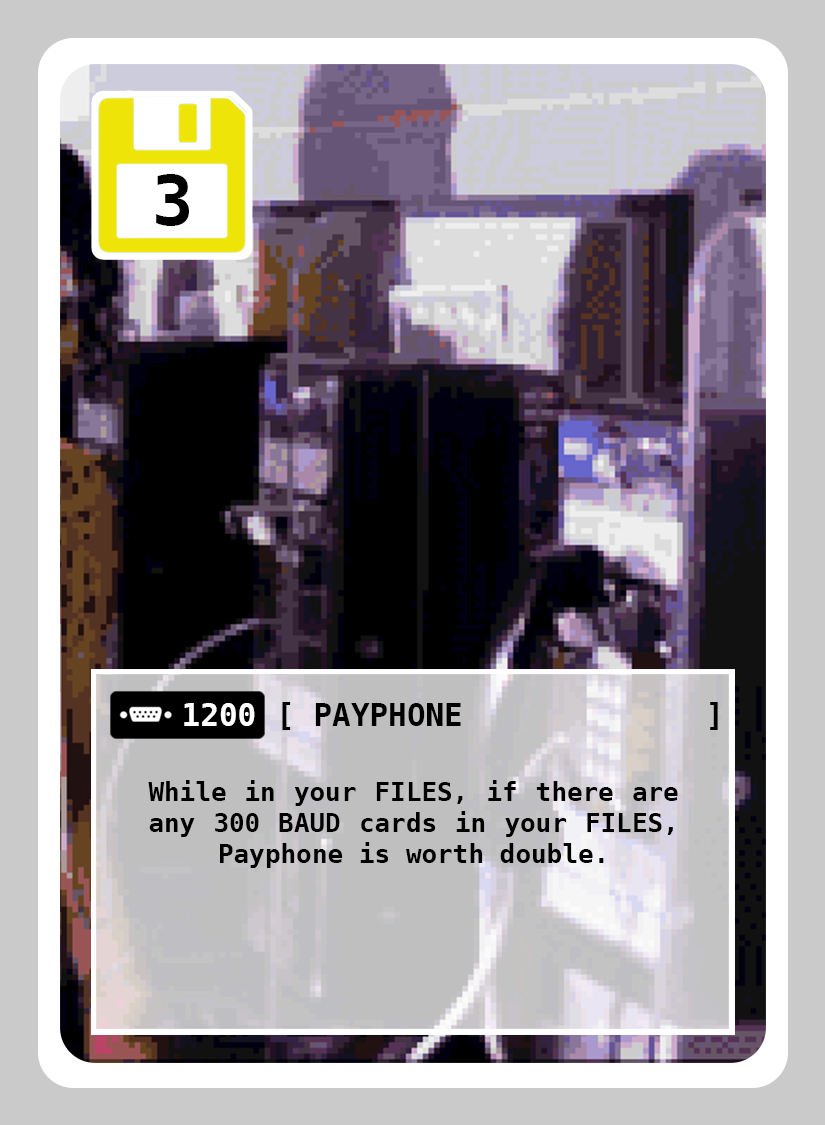
<style>
.page{position:relative;width:825px;height:1125px}
.page>*{position:absolute;margin:0}
.t1{font:69px "DejaVuSansMono-Bold";color:#000000}
.t2{font:31px "DejaVuSansMono-Bold";color:#ffffff}
.t3{font:31px "DejaVuSansMono-Bold";color:#000000}
.t4{font:26px "DejaVuSansMono-Bold";color:#000000}
</style>
<div class="page">
<p class="t1" style="left:156px;top:174px;width:33px;height:52px">3</p>
<p class="t2" style="left:184px;top:703px;width:71px;height:23px">1200</p>
<p class="t3" style="left:315px;top:703px;width:146px;height:23px">PAYPHONE</p>
<p class="t4" style="left:148px;top:780px;width:530px;height:88px;text-align:justify">While in your FILES, if there are any 300 BAUD cards in your FILES, Payphone is worth double.</p>
</div>
